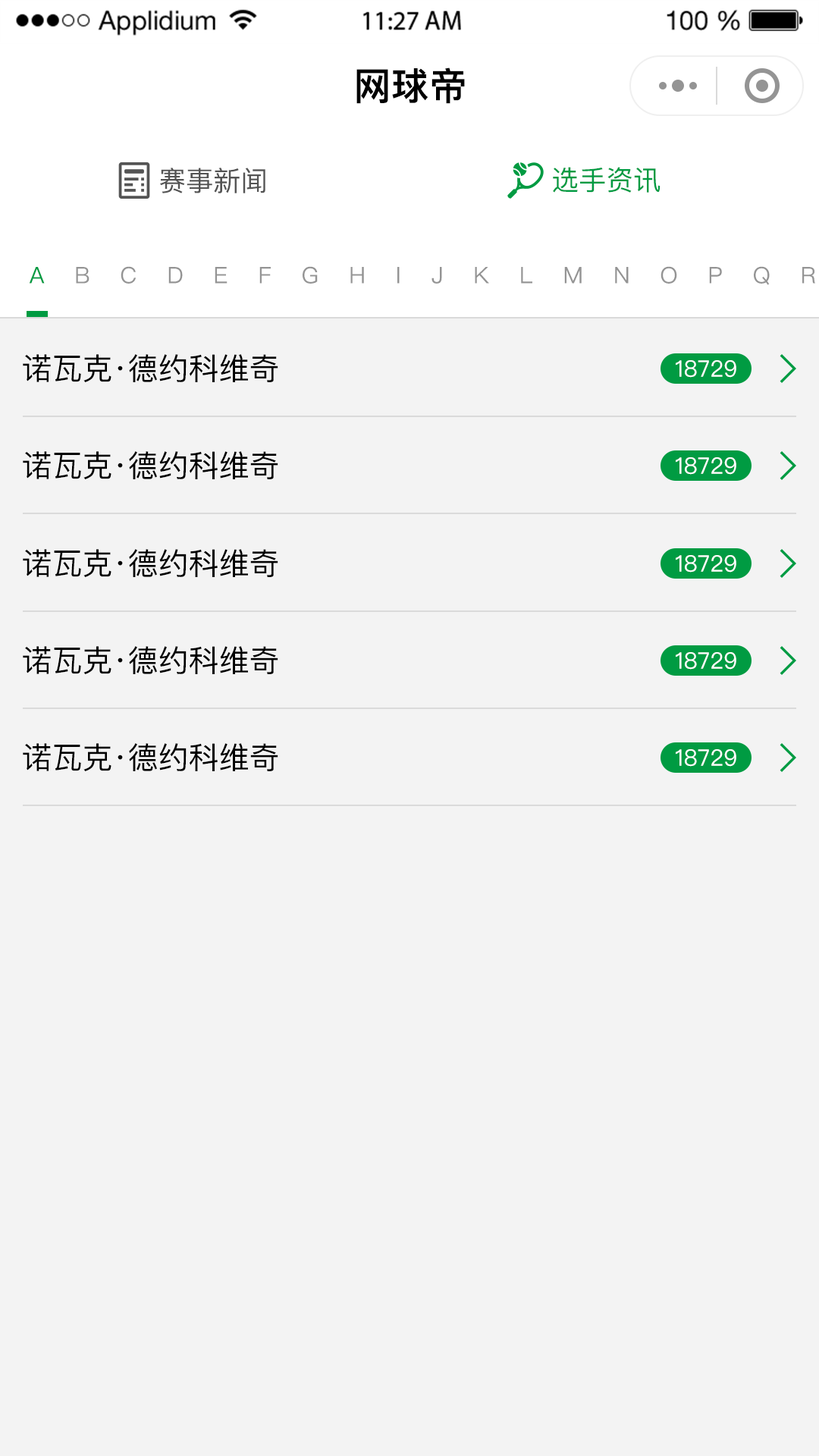
<style>
.page{position:relative;width:819px;height:1456px;background:#f3f3f3}
.page>*{position:absolute;margin:0}
.t1{font:37.9px "PingFangSC-Semibold";color:#000000}
.t2{font:27.3px "PingFangSC-Regular";color:#545454}
.t3{font:27.3px "PingFangSC-Regular";color:#009b42}
.t4{font:30.3px "PingFangSC-Regular";color:#000000}
.t5{font:22.7px "PingFangSC-Regular";color:#ffffff}
</style>
<div class="page">
<p class="t1" style="left:356px;top:67px;width:109px;height:37px">网球帝</p>
<p class="t2" style="left:160px;top:168px;width:105px;height:25px">赛事新闻</p>
<p class="t3" style="left:553px;top:167px;width:107px;height:26px">选手资讯</p>
<p class="t4" style="left:23px;top:354px;width:255px;height:28px">诺瓦克·德约科维奇</p>
<p class="t5" style="left:676px;top:360px;width:60px;height:18px">18729</p>
<p class="t4" style="left:23px;top:451px;width:255px;height:28px">诺瓦克·德约科维奇</p>
<p class="t5" style="left:676px;top:457px;width:60px;height:18px">18729</p>
<p class="t4" style="left:23px;top:549px;width:255px;height:28px">诺瓦克·德约科维奇</p>
<p class="t5" style="left:676px;top:555px;width:60px;height:18px">18729</p>
<p class="t4" style="left:23px;top:646px;width:255px;height:28px">诺瓦克·德约科维奇</p>
<p class="t5" style="left:676px;top:652px;width:60px;height:18px">18729</p>
<p class="t4" style="left:23px;top:743px;width:255px;height:28px">诺瓦克·德约科维奇</p>
<p class="t5" style="left:676px;top:749px;width:60px;height:18px">18729</p>
</div>
